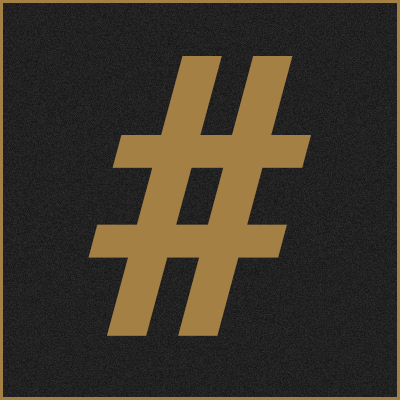
<style>
.page{position:relative;width:400px;height:400px}
.page>*{position:absolute;margin:0}
.t1{font:400px "Helvetica-Bold";color:#a58044;text-transform:uppercase}
</style>
<div class="page">
<p class="t1" style="left:88px;top:56px;width:223px;height:280px">#</p>
</div>
